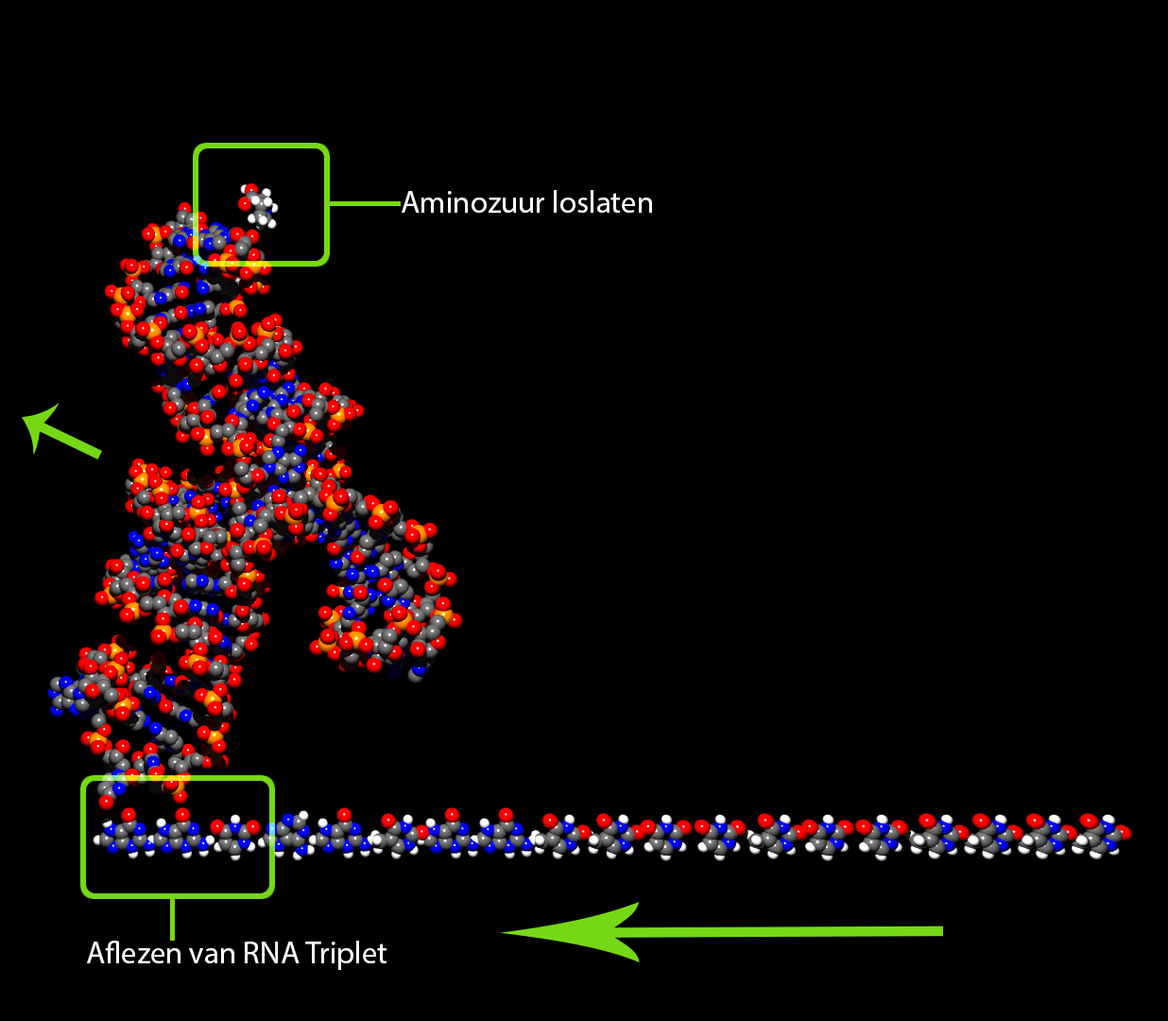
<style>
.page{position:relative;width:1168px;height:1021px;background:#000000}
.page>*{position:absolute;margin:0}
.t1{font:31.2px "MyriadPro-Regular";color:#ffffff}
</style>
<div class="page">
<p class="t1" style="left:402px;top:190px;width:250px;height:23px">Aminozuur loslaten</p>
<p class="t1" style="left:87px;top:940px;width:300px;height:30px">Aflezen van RNA Triplet</p>
</div>
